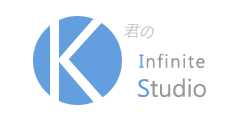
<style>
.page{position:relative;width:240px;height:120px;background:#ffffff}
.page>*{position:absolute;margin:0}
.t1{font:115px "MalgunGothicRegular";color:#ffffff}
.t2{font:18px "Gulim";letter-spacing:-0.16em;color:#cccccc;font-style:italic}
.t3{font:18px "MalgunGothicRegular";letter-spacing:-0.16em;color:#cccccc;font-style:italic}
.t4{font:18px "MalgunGothicRegular";letter-spacing:0.08em;color:#999999}
.t5{font:18px "MalgunGothicRegular";letter-spacing:0.08em;color:#639ede}
.t6{font:24px "MalgunGothicRegular";color:#999999}
.t7{font:24px "MalgunGothicRegular";color:#639ede}
</style>
<div class="page">
<p class="t1" style="left:50px;top:19px;width:57px;height:84px">K</p>
<p class="t2" style="left:123px;top:24px;width:31px;height:15px">君<span class="t3">の</span></p>
<p class="t4" style="left:139px;top:53px;width:66px;height:15px"><span class="t5">I</span>nfinite</p>
<p class="t6" style="left:138px;top:78px;width:68px;height:20px"><span class="t7">S</span>tudio</p>
</div>
